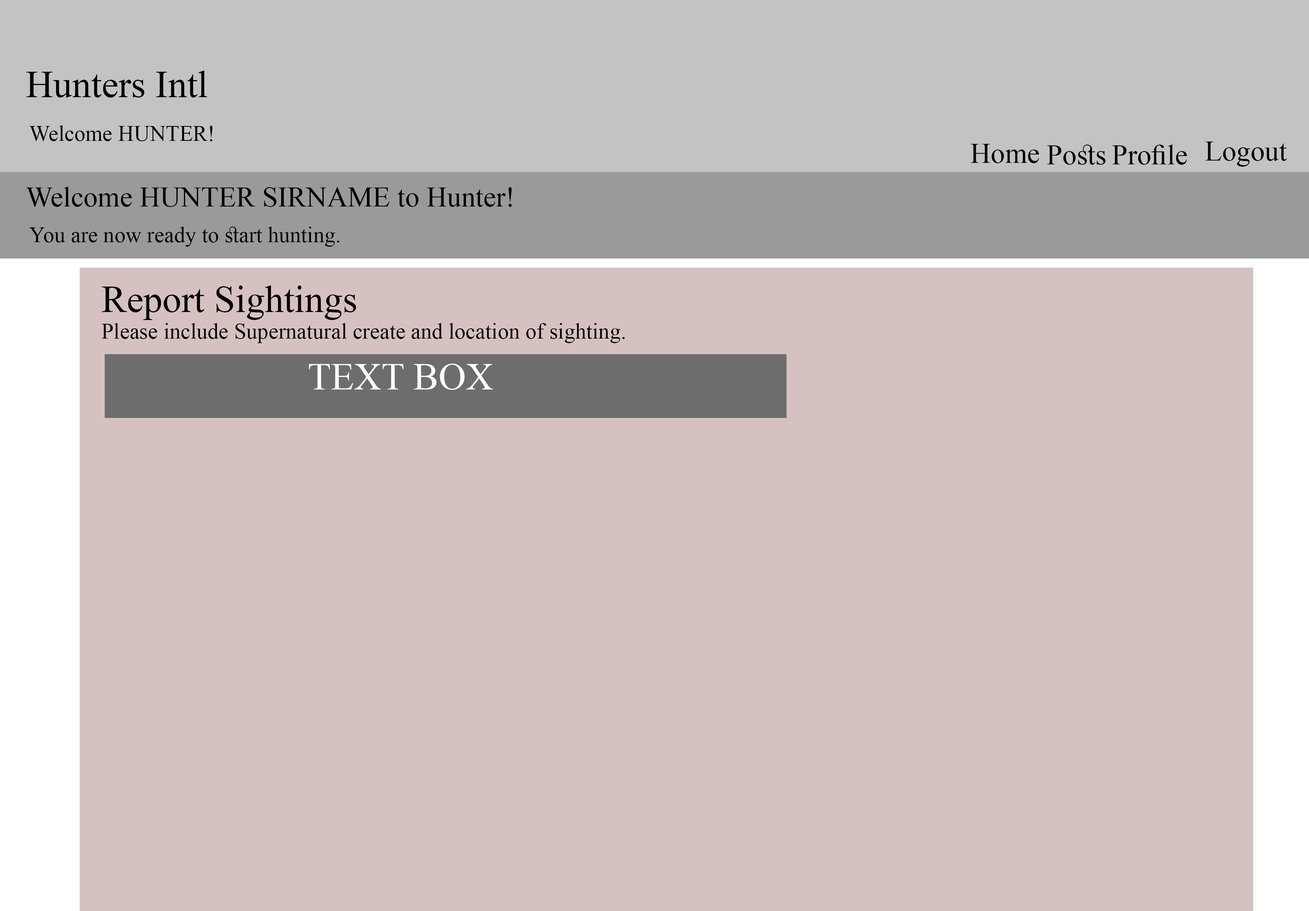
<style>
.page{position:relative;width:1309px;height:911px;background:#d6c1c1}
.page>*{position:absolute;margin:0}
.t1{font:37.9px "TimesNewRomanPSMT";color:#000000}
.t2{font:22.1px "TimesNewRomanPSMT";color:#000000}
.t3{font:28.5px "TimesNewRomanPSMT";color:#000000}
.t4{font:37.9px "TimesNewRomanPSMT";color:#ffffff}
</style>
<div class="page">
<p class="t1" style="left:26px;top:71px;width:181px;height:27px">Hunters Intl</p>
<p class="t2" style="left:29px;top:125px;width:184px;height:16px">!Welcome HUNTER</p>
<p class="t3" style="left:971px;top:144px;width:68px;height:19px">Home</p>
<p class="t3" style="left:1047px;top:145px;width:59px;height:20px">Posts</p>
<p class="t3" style="left:1112px;top:145px;width:75px;height:20px">Profile</p>
<p class="t3" style="left:1205px;top:142px;width:82px;height:25px">Logout</p>
<p class="t3" style="left:26px;top:187px;width:486px;height:20px">!Welcome HUNTER SIRNAME to Hunter Intl</p>
<p class="t2" style="left:29px;top:227px;width:311px;height:20px">.You are now ready to start hunting</p>
<p class="t2" style="left:102px;top:285px;width:523px;height:58px;text-align:right"><span class="t1">Report Sightings<br></span>.Please include Supernatural create and location of sighting</p>
<p class="t4" style="left:309px;top:364px;width:184px;height:26px">TEXT BOX</p>
</div>
